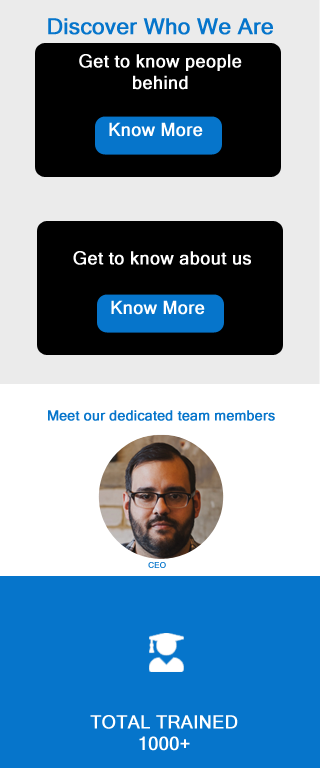
<style>
.page{position:relative;width:320px;height:768px;background:#0675cb}
.page>*{position:absolute;margin:0}
.t1{font:22px "MicrosoftSansSerif";color:#0675cb;font-weight:bold}
.t2{font:18px "MicrosoftSansSerif";color:#ffffff;font-weight:bold}
.t3{font:14px "MicrosoftSansSerif";color:#0675cb;font-weight:bold}
.t4{font:8px "MicrosoftSansSerif";color:#0675cb;font-weight:bold}
.t5{font:18px "MicrosoftSansSerif";color:#ffffff;text-transform:uppercase;font-weight:bold}
</style>
<div class="page">
<p class="t1" style="left:48px;top:18px;width:225px;height:17px">Discover Who We Are</p>
<p class="t2" style="left:79px;top:54px;width:163px;height:36px;text-align:center">Get to know people<br>behind</p>
<p class="t2" style="left:109px;top:122px;width:94px;height:15px">Know More</p>
<p class="t2" style="left:73px;top:251px;width:178px;height:14px">Get to know about us</p>
<p class="t2" style="left:111px;top:300px;width:94px;height:15px">Know More</p>
<p class="t3" style="left:48px;top:410px;width:227px;height:11px">Meet our dedicated team members</p>
<p class="t4" style="left:148px;top:562px;width:18px;height:6px">CEO</p>
<p class="t5" style="left:90px;top:715px;width:148px;height:36px;text-align:center">Total Trained<br>1000+</p>
</div>
